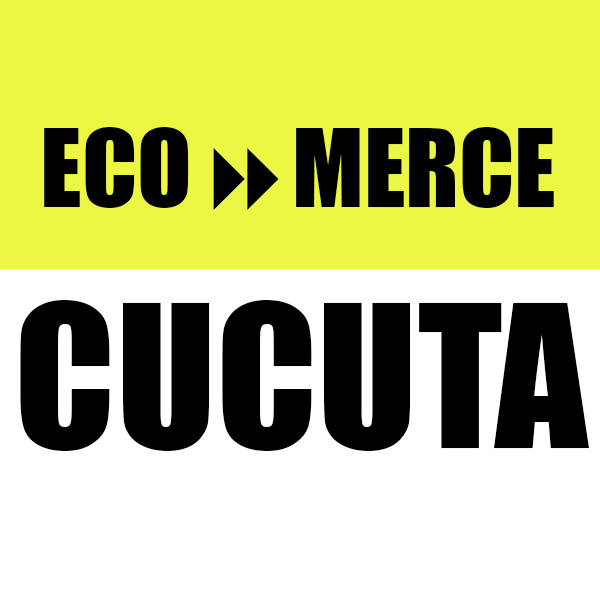
<style>
.page{position:relative;width:600px;height:600px;background:#ecf744}
.page>*{position:absolute;margin:0}
.t1{font:100.3px "Impact";color:#000000}
.t2{font:100.3px "Webdings";color:#000000}
.t3{font:183.3px "Impact";color:#000000}
</style>
<div class="page">
<p class="t1" style="left:44px;top:127px;width:510px;height:83px">ECO<span class="t2">8</span>MERCE</p>
<p class="t3" style="left:20px;top:299px;width:570px;height:152px">CUCUTA</p>
</div>
